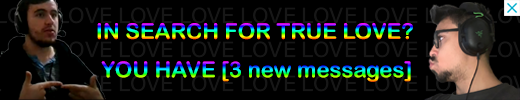
<style>
.page{position:relative;width:520px;height:100px;background:#000000}
.page>*{position:absolute;margin:0}
.t1{font:22px "ArialRoundedMTBold"}
</style>
<div class="page">
<p class="t1" style="left:97px;top:23px;width:316px;height:17px">IN SEARCH FOR TRUE LOVE?</p>
<p class="t1" style="left:101px;top:61px;width:310px;height:21px">YOU HAVE [3 new messages]</p>
</div>
